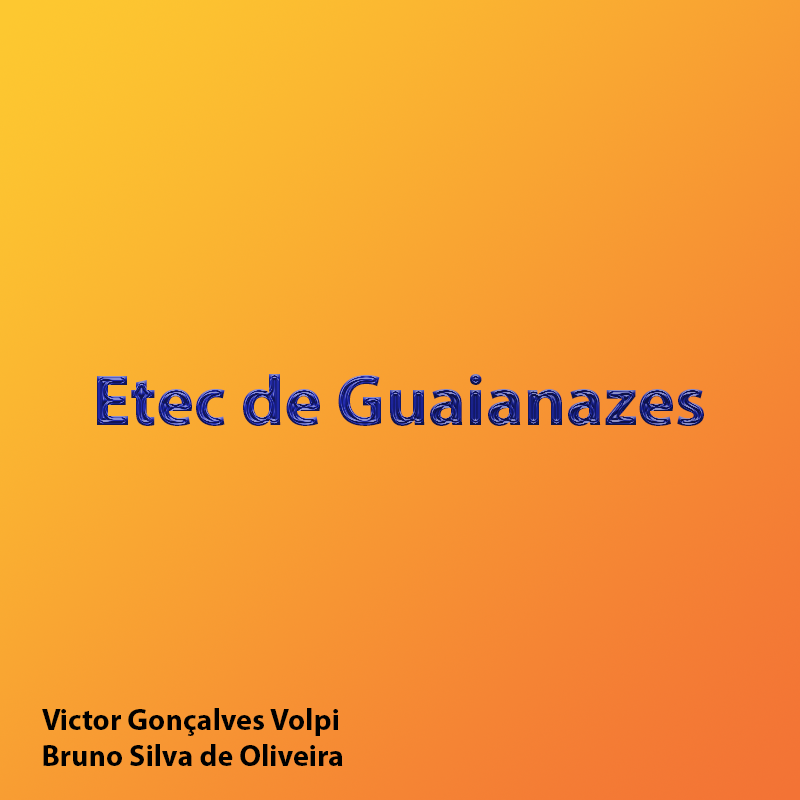
<style>
.page{position:relative;width:800px;height:800px}
.page>*{position:absolute;margin:0}
.t1{font:72px "MyriadPro-Bold"}
.t2{font:30px "MyriadPro-Bold";color:#000000}
</style>
<div class="page">
<p class="t1" style="left:97px;top:374px;width:607px;height:52px">Etec de Guaianazes</p>
<p class="t2" style="left:42px;top:708px;width:301px;height:58px">Victor Gonçalves Volpi<br>Bruno Silva de Oliveira</p>
</div>
